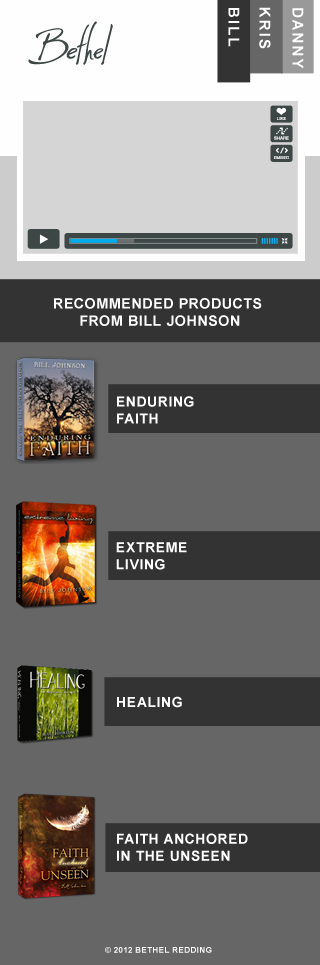
<style>
.page{position:relative;width:320px;height:965px;background:#666666}
.page>*{position:absolute;margin:0}
.t1{font:15px "Arial-BoldMT";letter-spacing:0.14em;color:#ffffff;text-transform:uppercase}
.t2{font:4.4px "HelveticaNeueLTStd-Md";color:#ffffff}
.t3{font:4.4px "HelveticaNeueLTStd-Md"}
.t4{font:14.4px/17.2px "Arial-BoldMT";letter-spacing:0.04em;color:#ffffff;text-transform:uppercase}
.t5{font:14px/17px "Arial-BoldMT";letter-spacing:0.04em;color:#ffffff;text-transform:uppercase}
.t6{font:14px "Arial-BoldMT";letter-spacing:0.04em;color:#ffffff;text-transform:uppercase}
.t7{font:8px "Arial-BoldMT";letter-spacing:0.04em;color:#ffffff;text-transform:uppercase}
</style>
<div class="page">
<p class="t1" style="left:228px;top:8px;width:12px;height:39px;rotate:90deg">BILL</p>
<p class="t1" style="left:259px;top:7px;width:12px;height:42px;rotate:90deg">KRIS</p>
<p class="t1" style="left:292px;top:8px;width:12px;height:61px;rotate:90deg">Danny</p>
<p class="t2" style="left:277px;top:117px;width:9px;height:3px">LIKE</p>
<p class="t3" style="left:274px;top:136px;width:15px;height:4px">SHARE</p>
<p class="t3" style="left:274px;top:156px;width:15px;height:3px">EMBED</p>
<p class="t4" style="left:54px;top:298px;width:208px;height:28px;text-align:center">Recommended products <br>from Bill Johnson</p>
<p class="t5" style="left:117px;top:396px;width:77px;height:28px">Enduring <br>Faith</p>
<p class="t5" style="left:116px;top:542px;width:71px;height:28px">Extreme <br>Living</p>
<p class="t6" style="left:117px;top:696px;width:65px;height:12px">Healing</p>
<p class="t5" style="left:117px;top:833px;width:131px;height:28px">Faith Anchored<br>in the unseen</p>
<p class="t7" style="left:105px;top:947px;width:107px;height:6px">© 2012 Bethel Redding</p>
</div>
